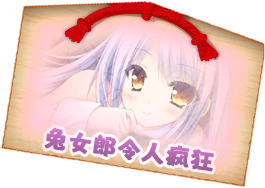
<style>
.page{position:relative;width:265px;height:188px;background:#ffffff}
.page>*{position:absolute;margin:0}
.t1{font:24px "MaokenAssortedSans";color:#b368b0;font-weight:bold}
</style>
<div class="page">
<p class="t1" style="left:44px;top:127px;width:170px;height:45px;rotate:8deg">兔女郎令人疯狂</p>
</div>
